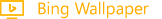
<style>
.page{position:relative;width:162px;height:19px;background:#ffffff}
.page>*{position:absolute;margin:0}
.t1{font:16.7px "SegoeUI";color:#ffae00}
</style>
<div class="page">
<p class="t1" style="left:38px;top:1px;width:111px;height:18px">Bing Wallpaper</p>
</div>
